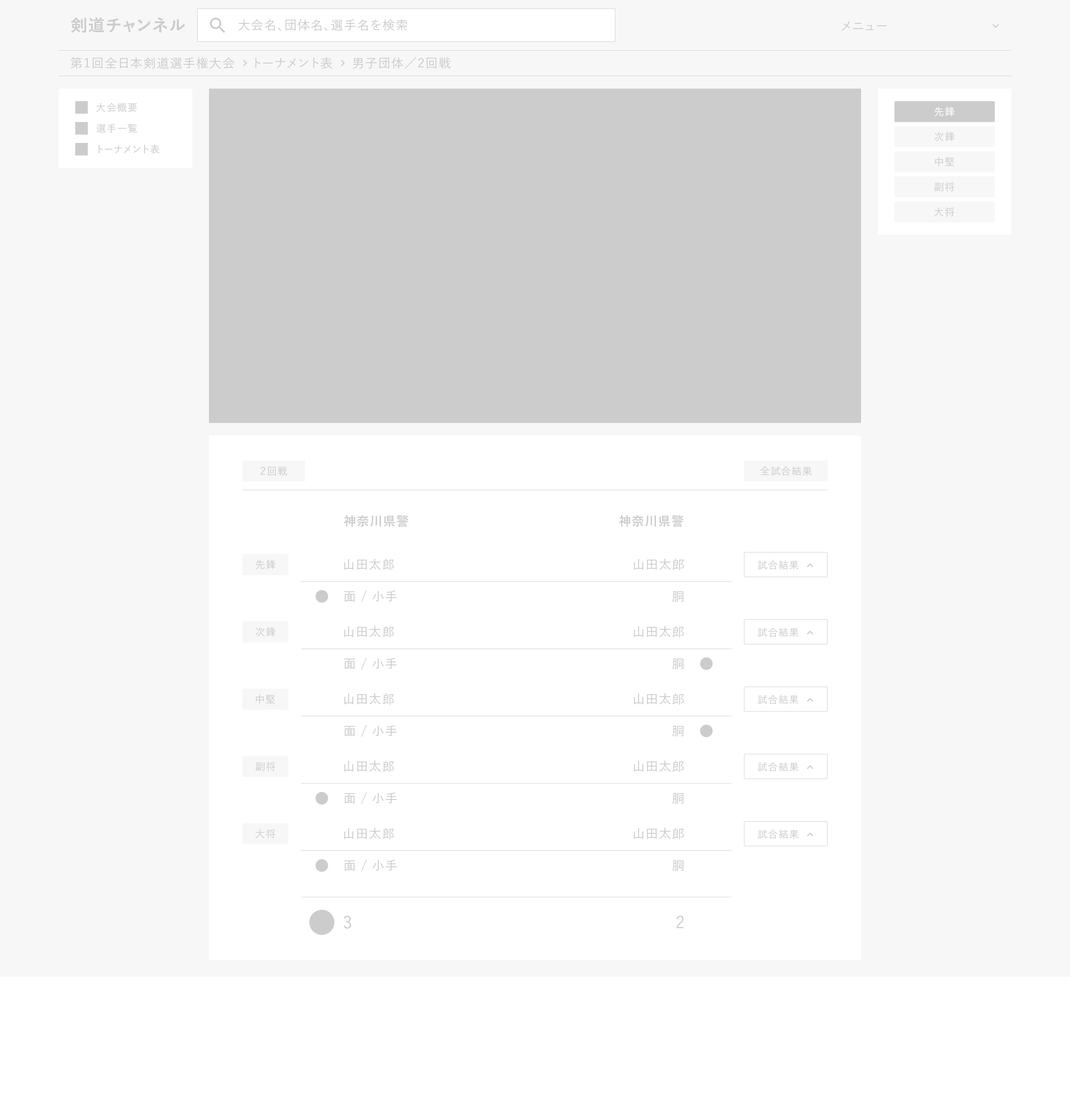
<style>
.page{position:relative;width:1070px;height:1115px;background:#ffffff}
.page>*{position:absolute;margin:0}
.t1{font:16.7px "YuGo-Bold";letter-spacing:0.05em;color:#cccccc}
.t2{font:12.5px "YuGo-Medium";letter-spacing:0.05em;color:#cccccc}
.t3{font:10px/20.9px "YuGo-Medium";letter-spacing:0.05em;color:#cccccc}
.t4{font:10px "YuGo-Medium";letter-spacing:0.05em;color:#ffffff}
.t5{font:10px/25.1px "YuGo-Medium";letter-spacing:0.05em;color:#cccccc}
.t6{font:10px "YuGo-Medium";letter-spacing:0.05em;color:#cccccc}
.t7{font:12.5px "YuGo-Bold";letter-spacing:0.05em;color:#cccccc}
.t8{font:10px "YuGo-Medium";letter-spacing:0.05em}
.t9{font:12.5px "YuGo-Medium";letter-spacing:0.05em}
.t10{font:16.7px "YuGo-Medium";letter-spacing:0.05em;color:#cccccc}
</style>
<div class="page">
<p class="t1" style="left:71px;top:17px;width:114px;height:16px">剣道チャンネル</p>
<p class="t2" style="left:238px;top:19px;width:169px;height:12px">大会名、団体名、選手名を検索</p>
<p class="t2" style="left:841px;top:21px;width:45px;height:10px">メニュー</p>
<p class="t2" style="left:71px;top:57px;width:164px;height:12px">第1回全日本剣道選手権大会</p>
<p class="t2" style="left:255px;top:57px;width:78px;height:12px">トーナメント表</p>
<p class="t2" style="left:352px;top:57px;width:99px;height:12px">男子団体／2回戦</p>
<p class="t3" style="left:96px;top:102px;width:64px;height:52px">大会概要<br>選手一覧<br>トーナメント表</p>
<p class="t4" style="left:934px;top:107px;width:20px;height:9px">先鋒</p>
<p class="t5" style="left:934px;top:132px;width:20px;height:85px;text-align:center">次鋒<br>中堅<br>副将<br>大将</p>
<p class="t6" style="left:260px;top:466px;width:27px;height:10px">２回戦</p>
<p class="t6" style="left:260px;top:466px;width:27px;height:10px">２回戦</p>
<p class="t6" style="left:760px;top:466px;width:52px;height:9px">全試合結果</p>
<p class="t6" style="left:760px;top:466px;width:52px;height:9px">全試合結果</p>
<p class="t7" style="left:344px;top:515px;width:64px;height:12px">神奈川県警</p>
<p class="t7" style="left:344px;top:515px;width:64px;height:12px">神奈川県警</p>
<p class="t7" style="left:619px;top:515px;width:64px;height:12px">神奈川県警</p>
<p class="t7" style="left:619px;top:515px;width:64px;height:12px">神奈川県警</p>
<p class="t6" style="left:255px;top:559px;width:21px;height:10px">先鋒</p>
<p class="t6" style="left:255px;top:559px;width:21px;height:10px">先鋒</p>
<p class="t2" style="left:344px;top:558px;width:50px;height:12px">山田太郎</p>
<p class="t2" style="left:344px;top:558px;width:50px;height:12px">山田太郎</p>
<p class="t2" style="left:633px;top:558px;width:51px;height:12px">山田太郎</p>
<p class="t2" style="left:633px;top:558px;width:51px;height:12px">山田太郎</p>
<p class="t6" style="left:758px;top:560px;width:40px;height:10px">試合結果</p>
<p class="t6" style="left:758px;top:560px;width:40px;height:10px">試合結果</p>
<p class="t2" style="left:344px;top:590px;width:53px;height:12px">面 / 小手</p>
<p class="t2" style="left:672px;top:591px;width:11px;height:11px">胴</p>
<p class="t6" style="left:255px;top:627px;width:21px;height:9px">次鋒</p>
<p class="t2" style="left:344px;top:626px;width:50px;height:12px">山田太郎</p>
<p class="t2" style="left:344px;top:625px;width:50px;height:13px">山田太郎</p>
<p class="t2" style="left:633px;top:626px;width:51px;height:12px">山田太郎</p>
<p class="t2" style="left:633px;top:625px;width:51px;height:13px">山田太郎</p>
<p class="t8" style="left:758px;top:628px;width:40px;height:9px">試合結果</p>
<p class="t6" style="left:758px;top:627px;width:40px;height:10px">試合結果</p>
<p class="t2" style="left:344px;top:658px;width:53px;height:11px">面 / 小手</p>
<p class="t2" style="left:672px;top:658px;width:11px;height:11px">胴</p>
<p class="t6" style="left:256px;top:694px;width:19px;height:10px">中堅</p>
<p class="t2" style="left:344px;top:694px;width:50px;height:12px">山田太郎</p>
<p class="t2" style="left:344px;top:693px;width:50px;height:12px">山田太郎</p>
<p class="t9" style="left:633px;top:694px;width:51px;height:12px">山田太郎</p>
<p class="t2" style="left:633px;top:693px;width:51px;height:12px">山田太郎</p>
<p class="t6" style="left:758px;top:694px;width:40px;height:10px">試合結果</p>
<p class="t2" style="left:344px;top:725px;width:53px;height:12px">面 / 小手</p>
<p class="t2" style="left:672px;top:725px;width:11px;height:12px">胴</p>
<p class="t6" style="left:256px;top:762px;width:19px;height:9px">副将</p>
<p class="t2" style="left:344px;top:760px;width:50px;height:12px">山田太郎</p>
<p class="t2" style="left:633px;top:760px;width:51px;height:12px">山田太郎</p>
<p class="t6" style="left:758px;top:762px;width:40px;height:9px">試合結果</p>
<p class="t2" style="left:344px;top:792px;width:53px;height:12px">面 / 小手</p>
<p class="t2" style="left:672px;top:793px;width:11px;height:11px">胴</p>
<p class="t6" style="left:255px;top:829px;width:20px;height:10px">大将</p>
<p class="t2" style="left:344px;top:827px;width:50px;height:12px">山田太郎</p>
<p class="t2" style="left:633px;top:827px;width:51px;height:12px">山田太郎</p>
<p class="t6" style="left:758px;top:829px;width:40px;height:10px">試合結果</p>
<p class="t2" style="left:344px;top:859px;width:53px;height:12px">面 / 小手</p>
<p class="t2" style="left:672px;top:860px;width:11px;height:11px">胴</p>
<p class="t10" style="left:343px;top:915px;width:8px;height:13px">3</p>
<p class="t10" style="left:676px;top:915px;width:8px;height:13px">2</p>
</div>
